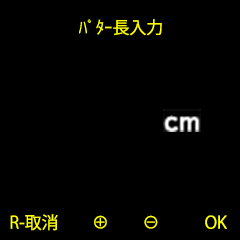
<style>
.page{position:relative;width:240px;height:240px;background:#000000}
.page>*{position:absolute;margin:0}
.t1{font:16.9px "KozGoPr6N-Regular";color:#ffff00}
</style>
<div class="page">
<p class="t1" style="left:79px;top:19px;width:83px;height:17px">ﾊﾟﾀｰ長入力</p>
<p class="t1" style="left:10px;top:214px;width:217px;height:17px">R-取消　　⊕　　⊖　 　  OK</p>
</div>
